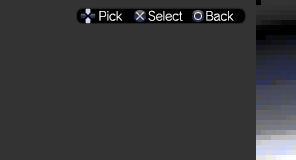
<style>
.page{position:relative;width:296px;height:160px;background:#333333}
.page>*{position:absolute;margin:0}
.t1{font:12px "RodinNTLGPro-L";color:#ffffff}
</style>
<div class="page">
<p class="t1" style="left:99px;top:10px;width:135px;height:11px">Pick      Select      Back</p>
</div>
